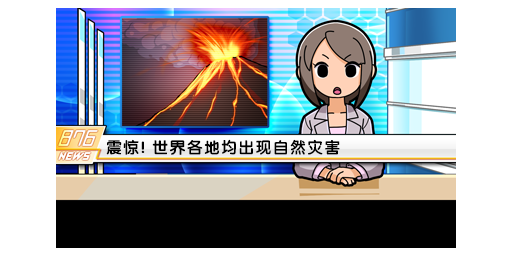
<style>
.page{position:relative;width:512px;height:256px;background:#ffffff}
.page>*{position:absolute;margin:0}
.t1{font:16px "FZY4K--GBK1-0";letter-spacing:0.075em;color:#000000}
</style>
<div class="page">
<p class="t1" style="left:106px;top:139px;width:234px;height:16px">震惊! 世界各地均出现自然灾害</p>
</div>
